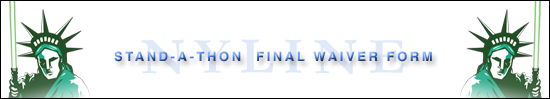
<style>
.page{position:relative;width:550px;height:99px;background:#ffffff}
.page>*{position:absolute;margin:0}
.t1{font:13px "Helvetica-Bold";letter-spacing:0.2em}
</style>
<div class="page">
<p class="t1" style="left:114px;top:51px;width:318px;height:11px">STAND-A-THON  FINAL WAIVER FORM</p>
</div>
